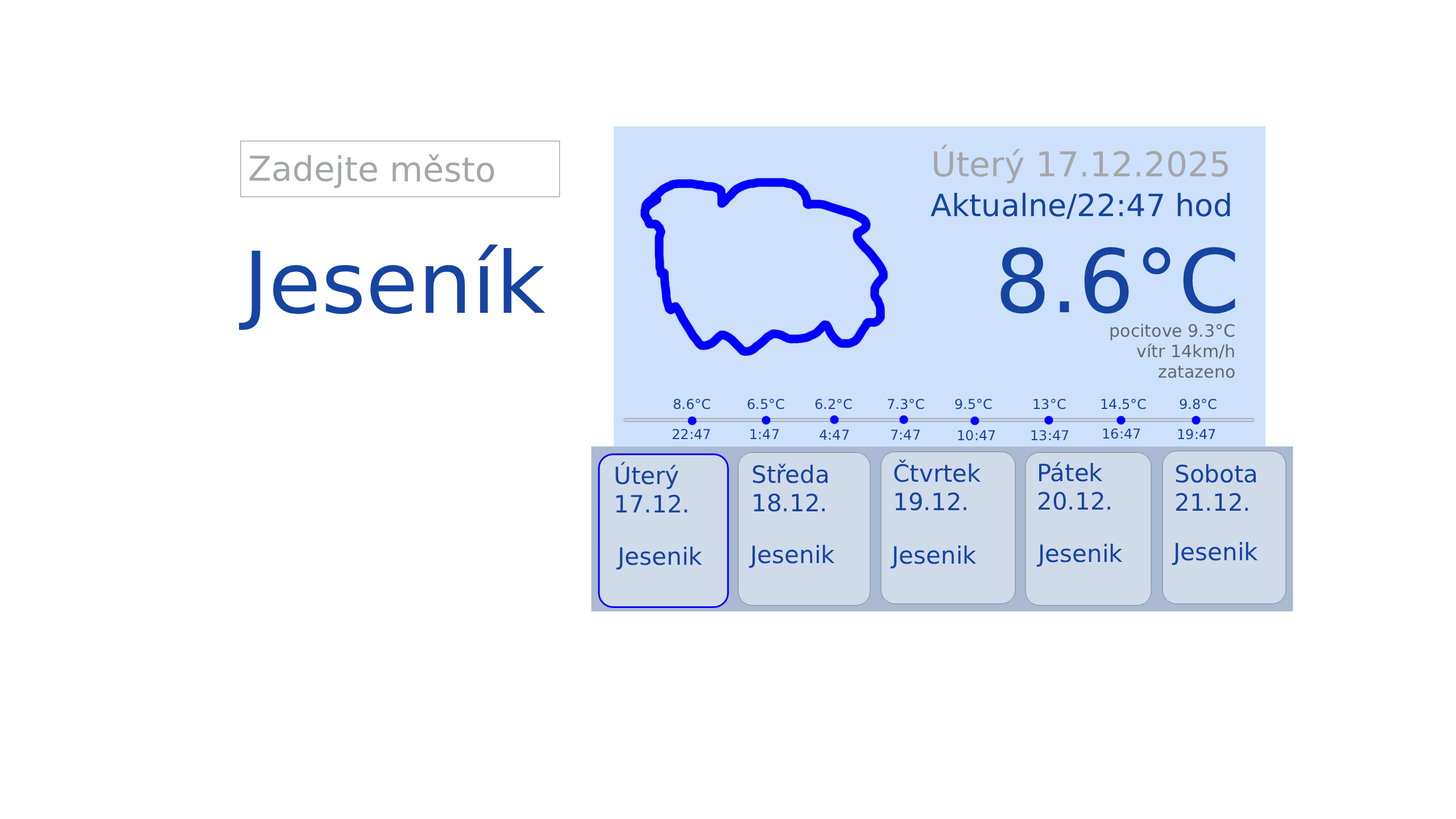
<style>
.page{position:relative;width:1456px;height:819px;background:#ffffff}
.page>*{position:absolute;margin:0}
.t1{font:34.1px "DejaVuSans";color:#a5a6a8}
.t2{font:30.7px "DejaVuSans";color:#1644a2}
.t3{font:85.3px "DejaVuSans";color:#1644a2}
.t4{font:87.8px "DejaVuSans";color:#1644a2}
.t5{font:17.1px "DejaVuSans";color:#626770}
.t6{font:13.6px "DejaVuSans";color:#1644a2}
.t7{font:23.9px "DejaVuSans";color:#1644a2}
</style>
<div class="page">
<p class="t1" style="left:934px;top:144px;width:294px;height:40px">Úterý 17.12.2025</p>
<p class="t1" style="left:249px;top:154px;width:245px;height:34px">Zadejte město</p>
<p class="t2" style="left:930px;top:192px;width:300px;height:28px">Aktualne/22:47 hod</p>
<p class="t3" style="left:239px;top:245px;width:306px;height:85px">Jeseník</p>
<p class="t4" style="left:1000px;top:247px;width:235px;height:67px">8.6°C</p>
<p class="t5" style="left:1110px;top:324px;width:125px;height:54px;text-align:right">pocitove 9.3°C<br>vítr 14km/h<br>zatazeno</p>
<p class="t6" style="left:673px;top:399px;width:37px;height:10px">8.6°C</p>
<p class="t6" style="left:747px;top:399px;width:37px;height:10px">6.5°C</p>
<p class="t6" style="left:815px;top:399px;width:37px;height:10px">6.2°C</p>
<p class="t6" style="left:887px;top:399px;width:37px;height:10px">7.3°C</p>
<p class="t6" style="left:955px;top:399px;width:37px;height:10px">9.5°C</p>
<p class="t6" style="left:1033px;top:399px;width:33px;height:10px">13°C</p>
<p class="t6" style="left:1101px;top:399px;width:45px;height:10px">14.5°C</p>
<p class="t6" style="left:1180px;top:399px;width:37px;height:10px">9.8°C</p>
<p class="t6" style="left:672px;top:429px;width:38px;height:10px">22:47</p>
<p class="t6" style="left:750px;top:429px;width:29px;height:10px">1:47</p>
<p class="t6" style="left:820px;top:429px;width:29px;height:11px">4:47</p>
<p class="t6" style="left:891px;top:429px;width:29px;height:11px">7:47</p>
<p class="t6" style="left:958px;top:430px;width:37px;height:11px">10:47</p>
<p class="t6" style="left:1031px;top:430px;width:38px;height:11px">13:47</p>
<p class="t6" style="left:1103px;top:428px;width:37px;height:11px">16:47</p>
<p class="t6" style="left:1178px;top:429px;width:37px;height:11px">19:47</p>
<p class="t7" style="left:615px;top:462px;width:72px;height:50px">Úterý<br>17.12.</p>
<p class="t7" style="left:894px;top:460px;width:87px;height:51px">Čtvrtek<br>19.12.</p>
<p class="t7" style="left:1039px;top:462px;width:71px;height:48px">Pátek<br>20.12.</p>
<p class="t7" style="left:752px;top:464px;width:76px;height:48px">Středa<br>18.12.</p>
<p class="t7" style="left:1176px;top:464px;width:80px;height:47px">Sobota<br>21.12.</p>
<p class="t7" style="left:748px;top:545px;width:87px;height:23px">Jesenik</p>
<p class="t7" style="left:890px;top:545px;width:87px;height:24px">Jesenik</p>
<p class="t7" style="left:1036px;top:544px;width:87px;height:23px">Jesenik</p>
<p class="t7" style="left:1172px;top:542px;width:86px;height:23px">Jesenik</p>
<p class="t7" style="left:616px;top:547px;width:86px;height:23px">Jesenik</p>
</div>
